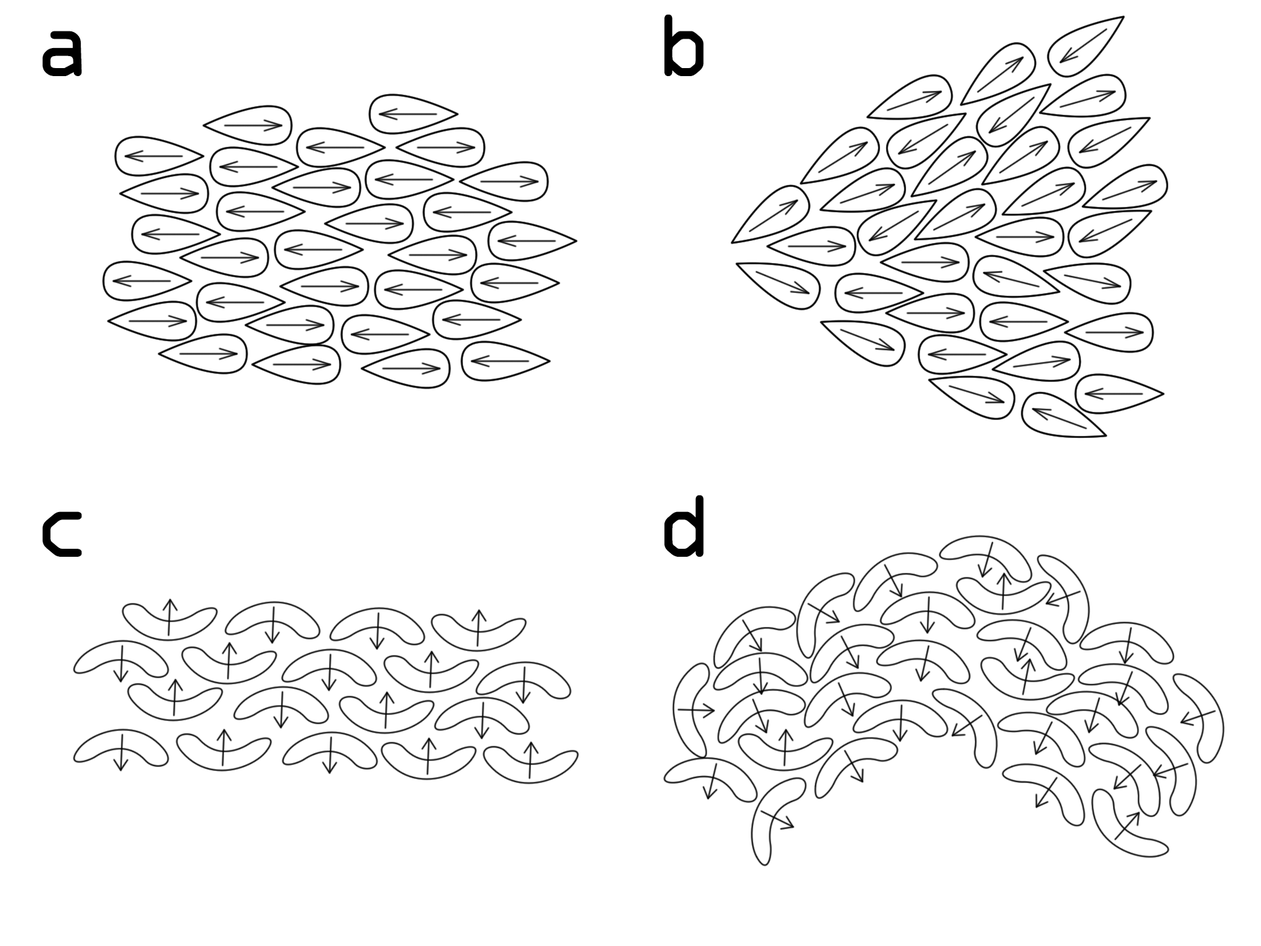
<style>
.page{position:relative;width:1261px;height:946px;background:#ffffff}
.page>*{position:absolute;margin:0}
.t1{font:83.4px "OCRAStd";color:#000000}
</style>
<div class="page">
<p class="t1" style="left:664px;top:14px;width:40px;height:62px">b</p>
<p class="t1" style="left:42px;top:31px;width:40px;height:45px">a</p>
<p class="t1" style="left:664px;top:494px;width:40px;height:63px">d</p>
<p class="t1" style="left:42px;top:511px;width:40px;height:46px">c</p>
</div>
